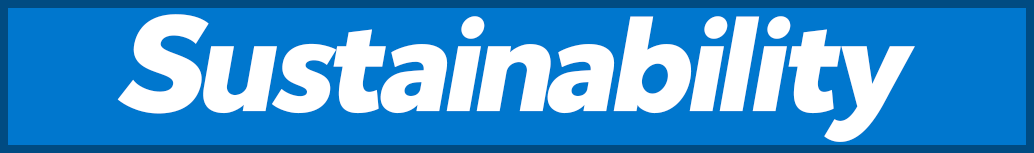
<style>
.page{position:relative;width:1034px;height:153px;background:#0077ce}
.page>*{position:absolute;margin:0}
.t1{font:134.9px "MADEGoodTimeGrotesk";letter-spacing:-0.05em;color:#ffffff;font-style:italic}
</style>
<div class="page">
<p class="t1" style="left:117px;top:14px;width:798px;height:128px">Sustainability</p>
</div>
